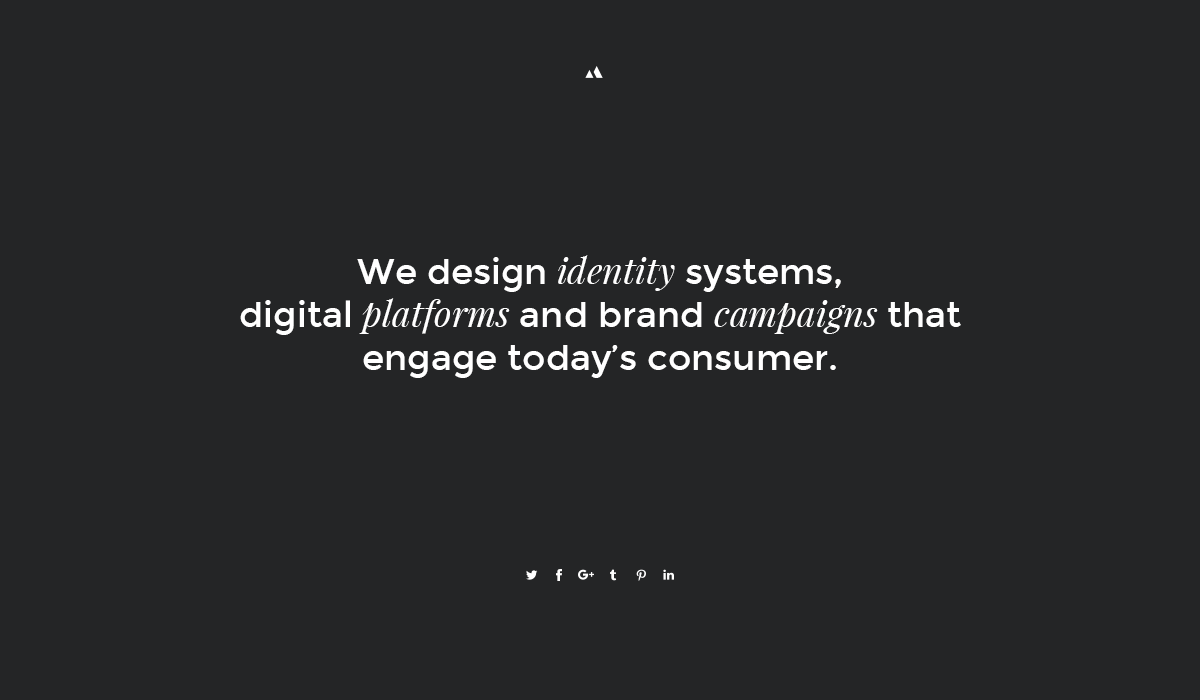
<style>
.page{position:relative;width:1200px;height:700px;background:#242526}
.page>*{position:absolute;margin:0}
.t1{font:35.8px "Montserrat-Regular";color:#ffffff}
.t2{font:35.8px "PlayfairDisplay-Italic";color:#ffffff}
</style>
<div class="page">
<p class="t1" style="left:240px;top:255px;width:721px;height:123px;text-align:center">We design<span class="t2"> identity</span> systems, <br>digital <span class="t2">platforms</span> and brand <span class="t2">campaigns</span> that <br>engage today’s consumer.</p>
</div>
